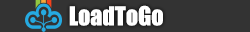
<style>
.page{position:relative;width:250px;height:32px;background:#333333}
.page>*{position:absolute;margin:0}
.t1{font:24px "Impact";color:#ffffff}
</style>
<div class="page">
<p class="t1" style="left:69px;top:5px;width:94px;height:21px">LoadToGo</p>
</div>
